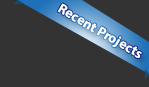
<style>
.page{position:relative;width:149px;height:87px;background:#333333}
.page>*{position:absolute;margin:0}
.t1{font:13.8px "MyriadPro-Bold";color:#ffffff}
</style>
<div class="page">
<p class="t1" style="left:57px;top:3px;width:85px;height:56px;rotate:30deg">Recent Projects</p>
</div>
